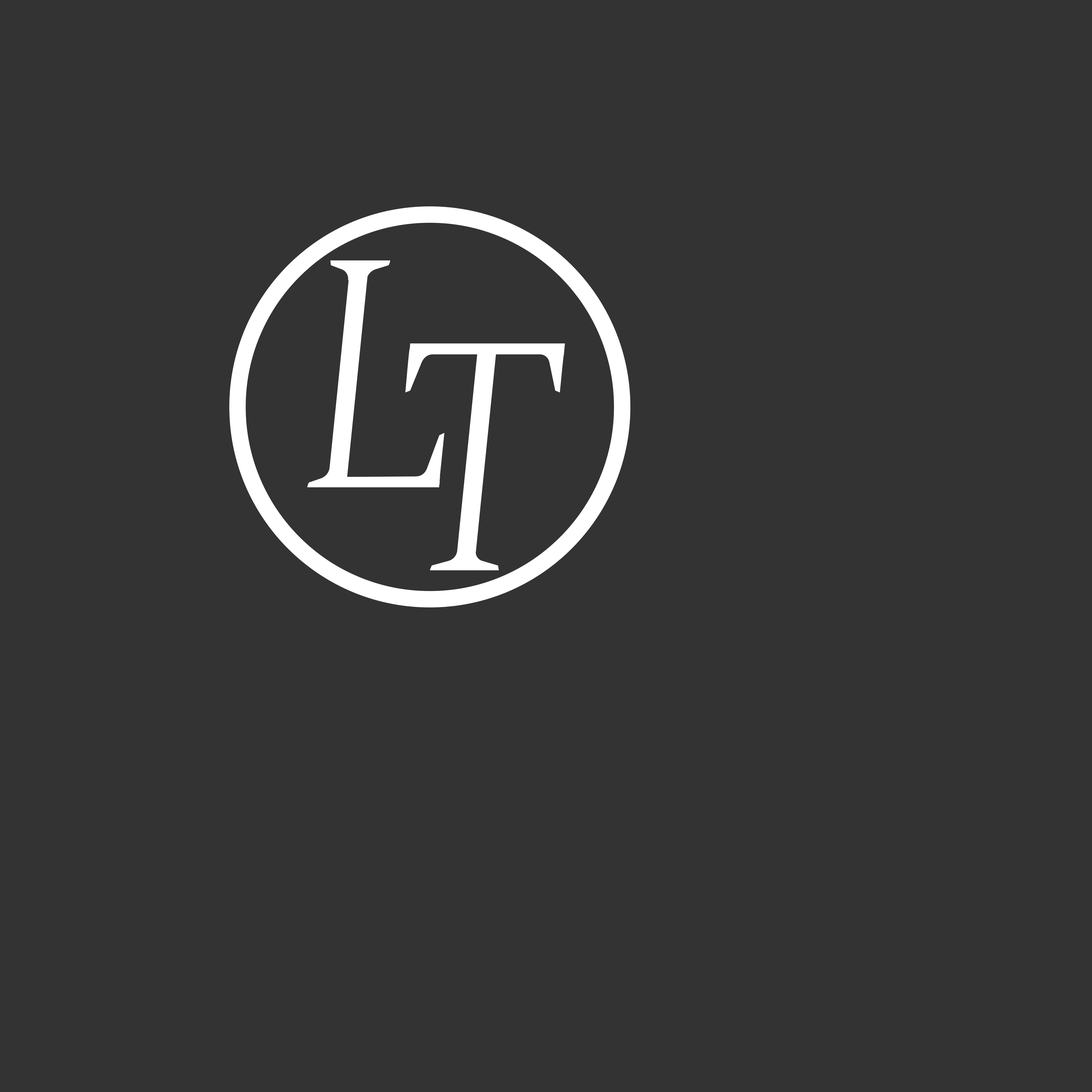
<style>
.page{position:relative;width:1092px;height:1092px;background:#333333}
.page>*{position:absolute;margin:0}
.t1{font:273px "Duskendale-Regular";letter-spacing:0.03em;color:#ffffff;scale:0.95 1}
</style>
<div class="page">
<p class="t1" style="left:307px;top:260px;width:137px;height:227px">L</p>
<p class="t1" style="left:405px;top:343px;width:160px;height:227px">T</p>
</div>
